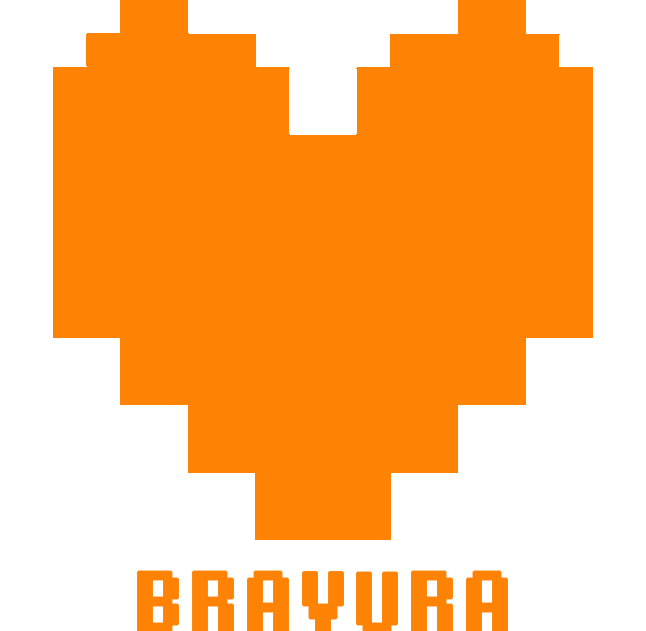
<style>
.page{position:relative;width:646px;height:631px;background:#fe8203}
.page>*{position:absolute;margin:0}
.t1{font:104px "DeterminationMonoWeb";color:#fe8203;font-weight:bold}
</style>
<div class="page">
<p class="t1" style="left:137px;top:570px;width:371px;height:63px">BRAVURA</p>
</div>
